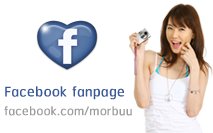
<style>
.page{position:relative;width:213px;height:133px;background:#ffffff}
.page>*{position:absolute;margin:0}
.t1{font:18px "RSU";letter-spacing:0.01em;color:#3b5998}
.t2{font:15.6px "RSU";letter-spacing:0.01em;color:#9c9c9c}
</style>
<div class="page">
<p class="t1" style="left:5px;top:86px;width:119px;height:14px">Facebook fanpage</p>
<p class="t2" style="left:4px;top:106px;width:128px;height:10px">facebook.com/morbuu</p>
</div>
